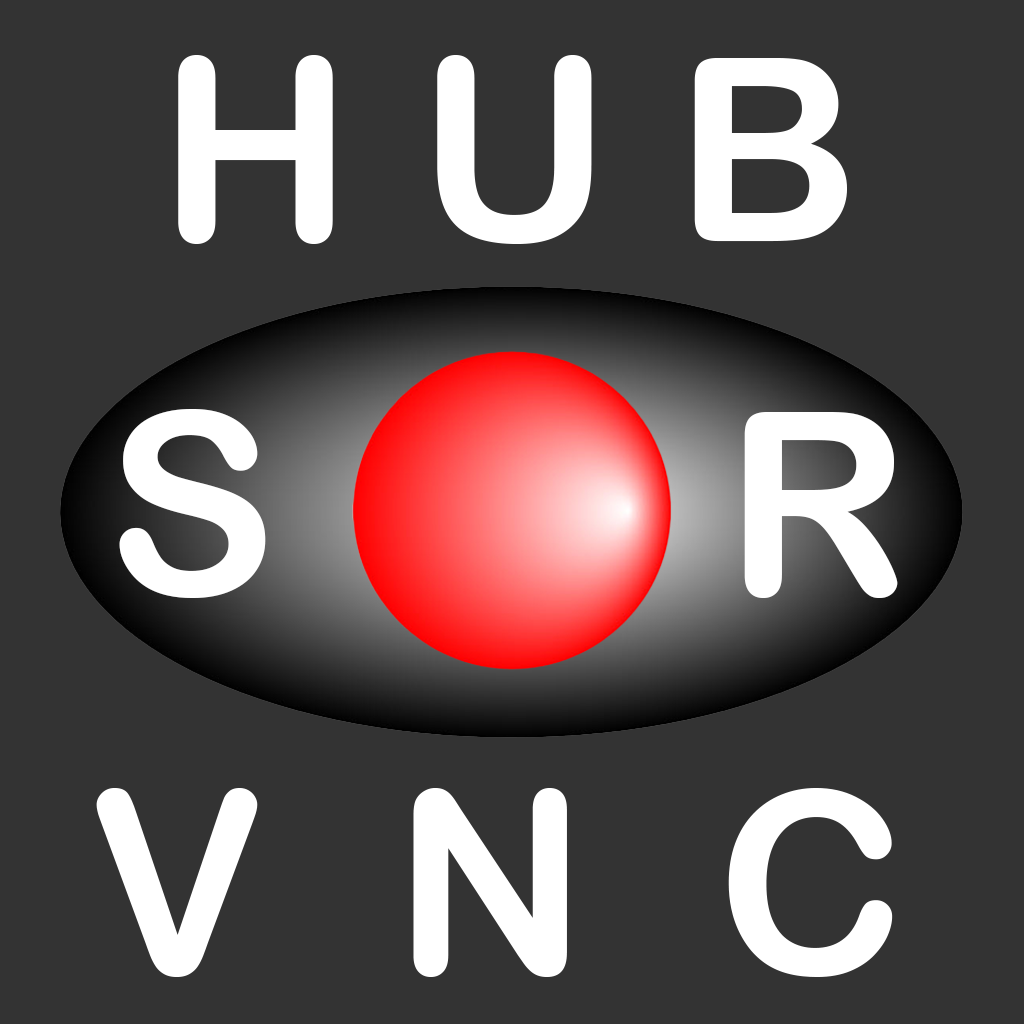
<style>
.page{position:relative;width:1024px;height:1024px;background:#333333}
.page>*{position:absolute;margin:0}
.t1{font:256px "ArialRoundedMTBold";color:#ffffff}
</style>
<div class="page">
<p class="t1" style="left:178px;top:55px;width:669px;height:189px">H U B</p>
<p class="t1" style="left:119px;top:409px;width:779px;height:189px">S       R</p>
<p class="t1" style="left:96px;top:788px;width:797px;height:189px">V  N  C</p>
</div>
